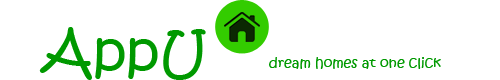
<style>
.page{position:relative;width:500px;height:80px;background:#ffffff}
.page>*{position:absolute;margin:0}
.t1{font:55.6px "KristenITC-Regular";color:#009900}
.t2{font:13.9px "KristenITC-Regular";color:#009900}
</style>
<div class="page">
<p class="t1" style="left:39px;top:27px;width:167px;height:53px">AppU</p>
<p class="t2" style="left:269px;top:57px;width:172px;height:12px">dream homes at one click</p>
</div>
